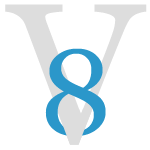
<style>
.page{position:relative;width:150px;height:150px;background:#ffffff}
.page>*{position:absolute;margin:0}
.t1{font:200px "Georgia";color:#dddddd}
.t2{font:120px "Georgia";color:#2b97ca}
</style>
<div class="page">
<p class="t1" style="left:5px;top:4px;width:142px;height:141px">V</p>
<p class="t2" style="left:45px;top:48px;width:61px;height:88px">8</p>
</div>
